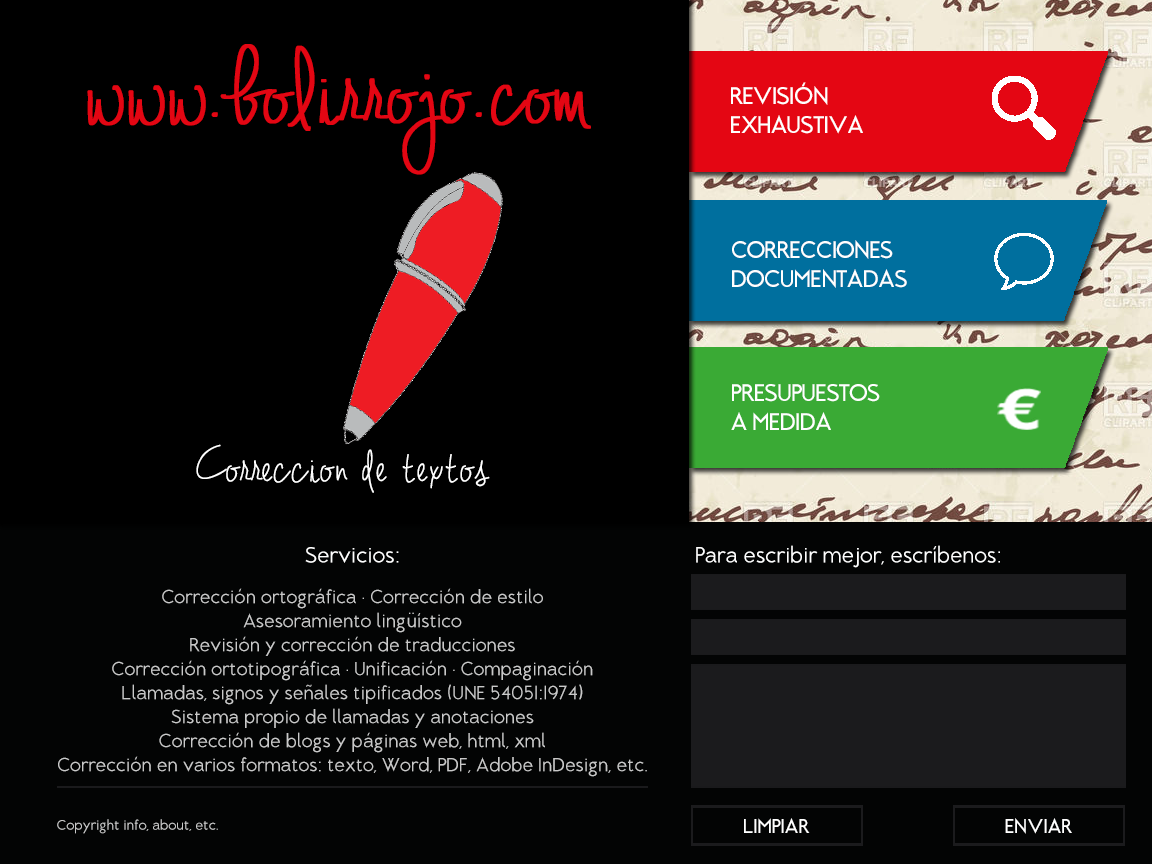
<style>
.page{position:relative;width:1152px;height:864px;background:#000000}
.page>*{position:absolute;margin:0}
.t1{font:100px "JenniferLynne";letter-spacing:0.01em;color:#e30613;font-weight:bold}
.t2{font:100px "JenniferLynne";color:#e30613;font-weight:bold}
.t3{font:24px "BrixtonMedium";letter-spacing:0.03em;color:#ffffff}
.t4{font:48px "JenniferLynne";letter-spacing:0.03em;color:#ffffff;font-weight:bold}
.t5{font:48px "JenniferLynne";letter-spacing:0.005em;color:#ffffff;font-weight:bold}
.t6{font:48px "JenniferLynne";letter-spacing:0.025em;color:#ffffff;font-weight:bold}
.t7{font:48px "JenniferLynne";letter-spacing:0.05em;color:#ffffff;font-weight:bold}
.t8{font:22px "BrixtonBook";letter-spacing:0.05em;color:#ffffff}
.t9{font:19px/24px "BrixtonBook";letter-spacing:0.05em;color:#c9c9c9}
.t10{font:14px "BrixtonBook";letter-spacing:0.05em;color:#c9c9c9}
.t11{font:20px "BrixtonMedium";letter-spacing:0.05em;color:#ffffff}
</style>
<div class="page">
<p class="t1" style="left:87px;top:44px;width:504px;height:131px"><span class="t2">www.</span>bolirrojo<span class="t2">.com</span></p>
<p class="t3" style="left:731px;top:82px;width:132px;height:52px">REVISIÓN<br>EXHAUSTIVA</p>
<p class="t3" style="left:732px;top:240px;width:175px;height:48px">CORRECCIONES<br>DOCUMENTADAS</p>
<p class="t3" style="left:731px;top:384px;width:149px;height:46px">PRESUPUESTOS<br>A MEDIDA</p>
<p class="t4" style="left:196px;top:444px;width:294px;height:49px"><span class="t5">Corre</span><span class="t6">ccion</span><span class="t7"> de </span>textos</p>
<p class="t8" style="left:696px;top:545px;width:304px;height:23px">Para escribir mejor, escríbenos:</p>
<p class="t8" style="left:305px;top:547px;width:94px;height:16px">Servicios:</p>
<p class="t9" style="left:58px;top:588px;width:589px;height:189px;text-align:justify">Corrección ortográfica · Corrección de estilo <br>Asesoramiento lingüístico<br>Revisión y corrección de traducciones<br>Corrección ortotipográfica · Unificación · Compaginación<br>Llamadas, signos y señales tipificados (UNE 54051:1974) <br>Sistema propio de llamadas y anotaciones <br>Corrección de blogs y páginas web, html, xml<br>Corrección en varios formatos: texto, Word, PDF, Adobe InDesign, etc.</p>
<p class="t10" style="left:57px;top:819px;width:161px;height:15px">Copyright info, about, etc.</p>
<p class="t11" style="left:744px;top:818px;width:66px;height:15px">LIMPIAR</p>
<p class="t11" style="left:1005px;top:818px;width:67px;height:16px">ENVIAR</p>
</div>
